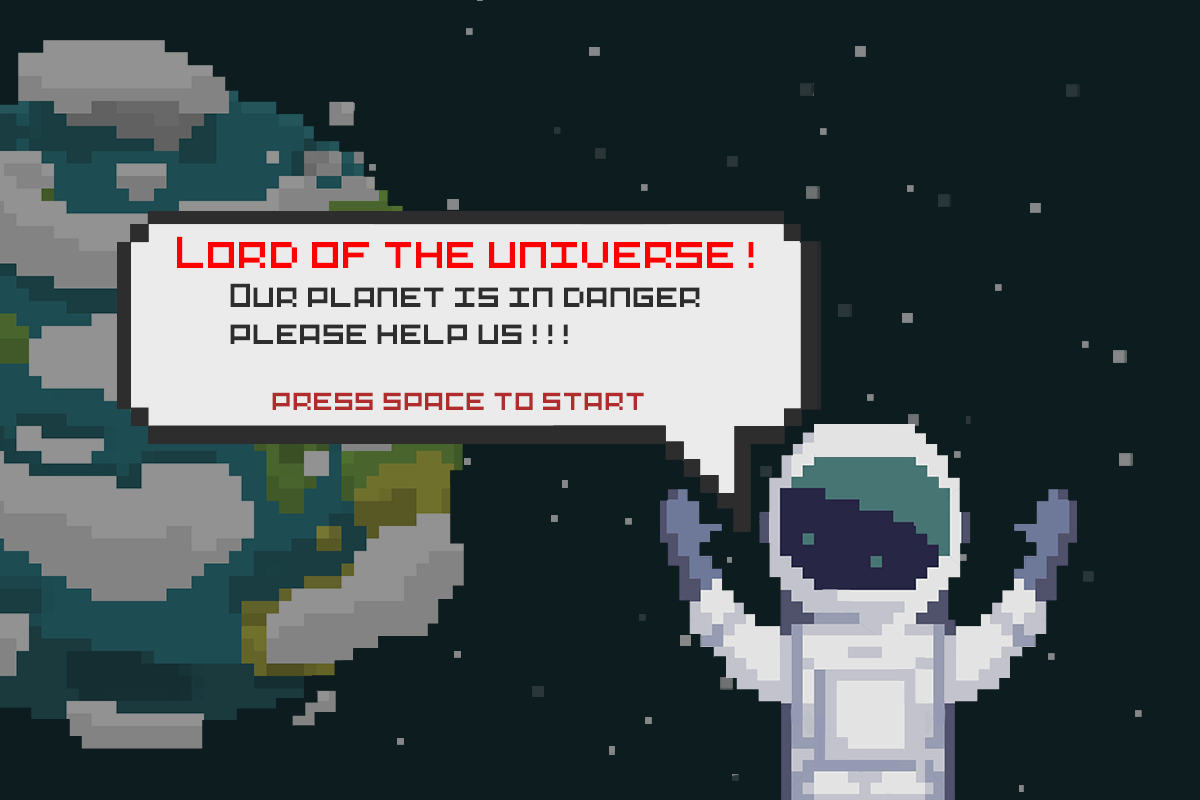
<style>
.page{position:relative;width:1200px;height:800px;background:#0d1c1e}
.page>*{position:absolute;margin:0}
.t1{font:41.6px "Pixel-Art";color:#ff0000}
.t2{font:31px "Pixel-Art";color:#2d2d2d}
.t3{font:27.7px "Pixel-Art";color:#b12d2d}
</style>
<div class="page">
<p class="t1" style="left:177px;top:236px;width:577px;height:32px">Lord of the universe!</p>
<p class="t2" style="left:230px;top:283px;width:470px;height:61px">Our planet is in danger <br>please help us!!!</p>
<p class="t3" style="left:272px;top:392px;width:372px;height:18px">press space to start</p>
</div>
